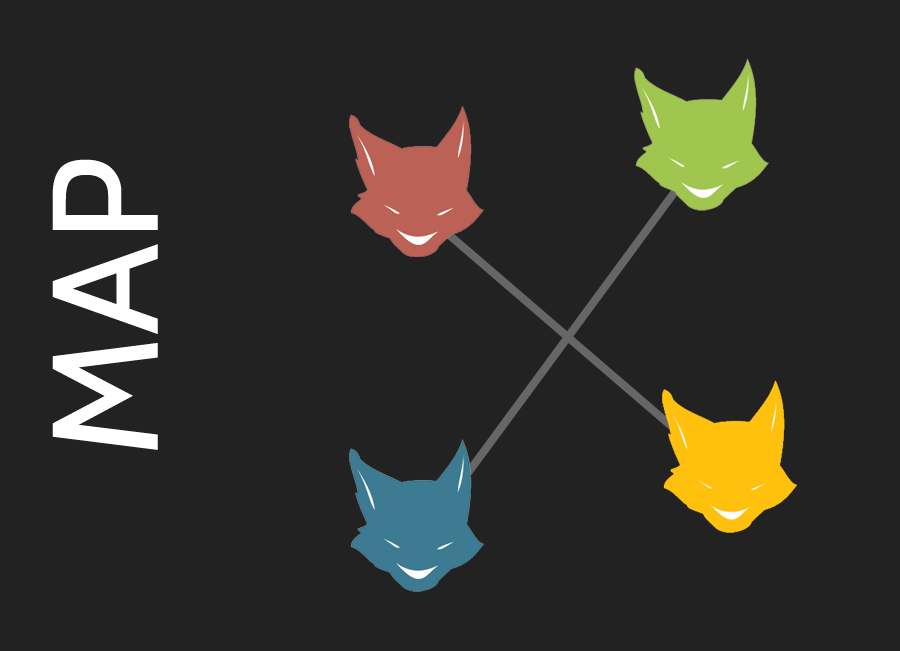
<style>
.page{position:relative;width:900px;height:651px;background:#222222}
.page>*{position:absolute;margin:0}
.t1{font:150px "Cabin-Regular";color:#ffffff}
</style>
<div class="page">
<p class="t1" style="left:52px;top:159px;width:106px;height:291px;rotate:-90deg">MAP</p>
</div>
